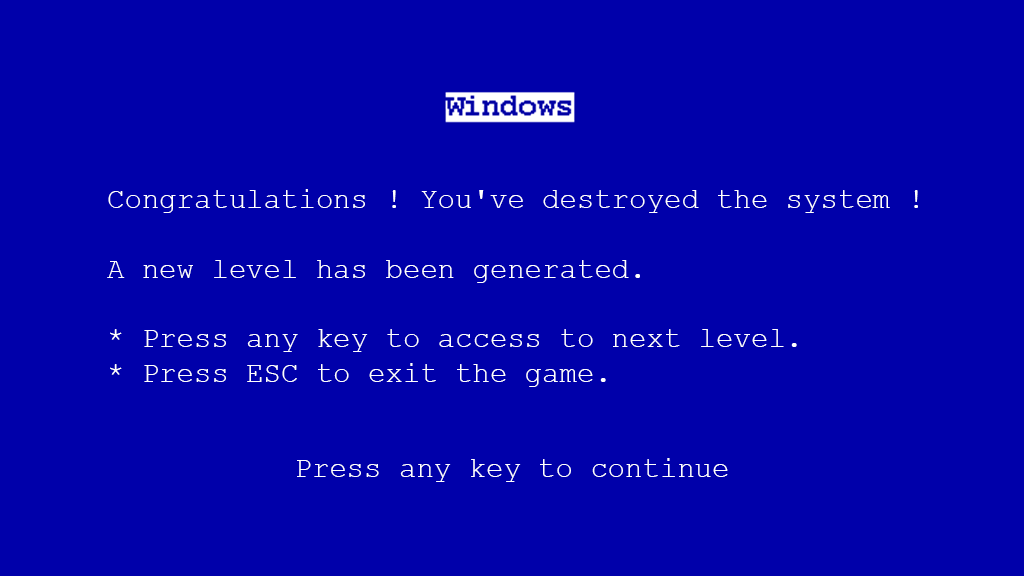
<style>
.page{position:relative;width:1024px;height:576px;background:#0000aa}
.page>*{position:absolute;margin:0}
.t1{font:29px "CourierNewPSMT";color:#ffffff}
</style>
<div class="page">
<p class="t1" style="left:107px;top:189px;width:811px;height:198px">Congratulations ! You've destroyed the system !<br><br>A new level has been generated.<br><br>* Press any key to access to next level.<br>* Press ESC to exit the game.</p>
<p class="t1" style="left:297px;top:458px;width:431px;height:24px">Press any key to continue</p>
</div>
